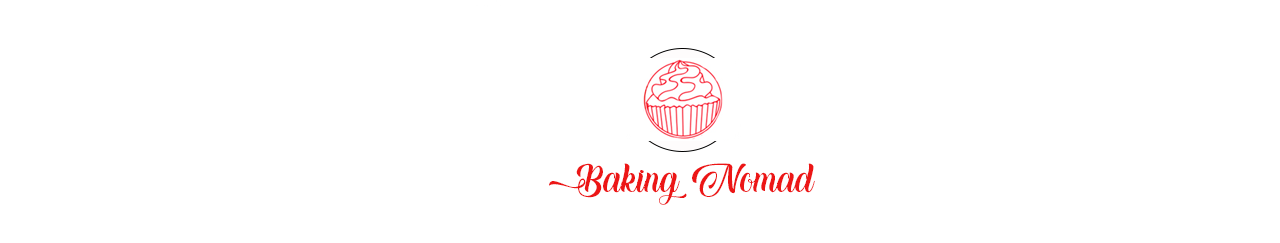
<style>
.page{position:relative;width:1280px;height:243px;background:#ffffff}
.page>*{position:absolute;margin:0}
.t1{font:48px "Baking-Lion---Personal-Use";color:#ec1616}
</style>
<div class="page">
<p class="t1" style="left:549px;top:163px;width:266px;height:42px">Baking Nomad</p>
</div>
